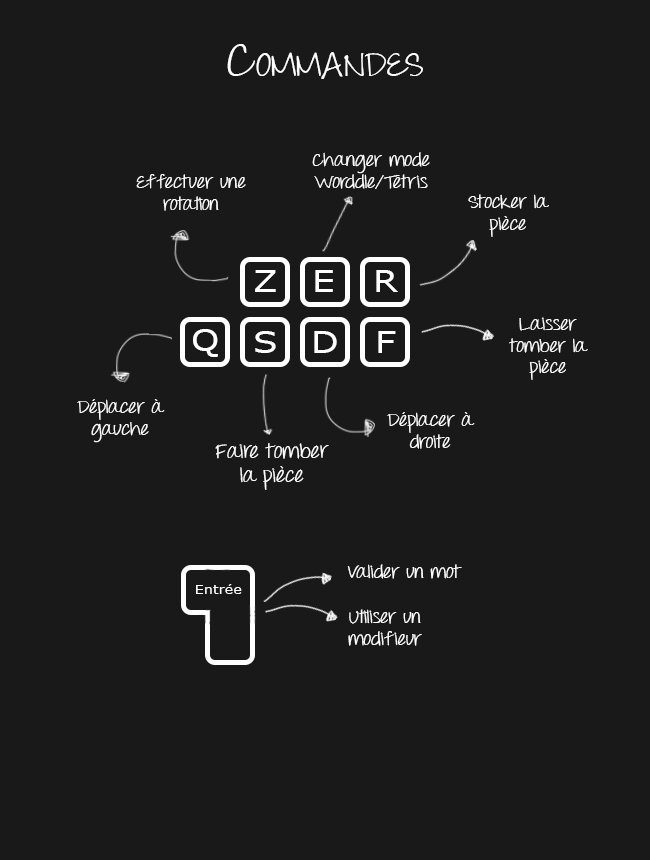
<style>
.page{position:relative;width:650px;height:860px;background:#191919}
.page>*{position:absolute;margin:0}
.t1{font:48px "ThrowMyHandsUpintheAir";color:#ffffff;font-variant:small-caps;scale:1.2 1}
.t2{font:48px "ThrowMyHandsUpintheAir";color:#ffffff;scale:1.2 1}
.t3{font:18px "ThrowMyHandsUpintheAir";color:#ffffff;scale:1.2 1}
.t4{font:30px "Verdana";color:#ffffff;scale:1.2 1}
.t5{font:20px "ThrowMyHandsUpintheAir";color:#ffffff;scale:1.2 1}
.t6{font:12px "Verdana";color:#ffffff;scale:1.2 1}
</style>
<div class="page">
<p class="t1" style="left:227px;top:44px;width:196px;height:35px"><span class="t2">C</span>ommandes</p>
<p class="t3" style="left:312px;top:152px;width:118px;height:37px;text-align:center">Changer mode Worddle/Tetris</p>
<p class="t3" style="left:136px;top:174px;width:110px;height:37px;text-align:center">Effectuer une rotation</p>
<p class="t3" style="left:468px;top:194px;width:81px;height:43px;text-align:center">Stocker la pièce</p>
<p class="t4" style="left:255px;top:270px;width:21px;height:22px">Z</p>
<p class="t4" style="left:315px;top:270px;width:18px;height:22px">E</p>
<p class="t4" style="left:376px;top:270px;width:22px;height:22px">R</p>
<p class="t3" style="left:509px;top:317px;width:79px;height:63px;text-align:center">Laisser tomber la pièce</p>
<p class="t4" style="left:193px;top:329px;width:25px;height:28px">Q</p>
<p class="t4" style="left:255px;top:331px;width:21px;height:22px">S</p>
<p class="t4" style="left:314px;top:331px;width:23px;height:22px">D</p>
<p class="t4" style="left:378px;top:331px;width:18px;height:22px">F</p>
<p class="t3" style="left:77px;top:399px;width:88px;height:44px;text-align:center">Déplacer à gauche</p>
<p class="t3" style="left:387px;top:412px;width:88px;height:37px;text-align:center">Déplacer à droite</p>
<p class="t5" style="left:215px;top:443px;width:114px;height:47px;text-align:center">Faire tomber la pièce</p>
<p class="t3" style="left:347px;top:564px;width:115px;height:15px">Valider un mot</p>
<p class="t6" style="left:196px;top:584px;width:46px;height:10px">Entrée</p>
<p class="t3" style="left:348px;top:609px;width:74px;height:37px;text-align:center">Utiliser un modifieur</p>
</div>
